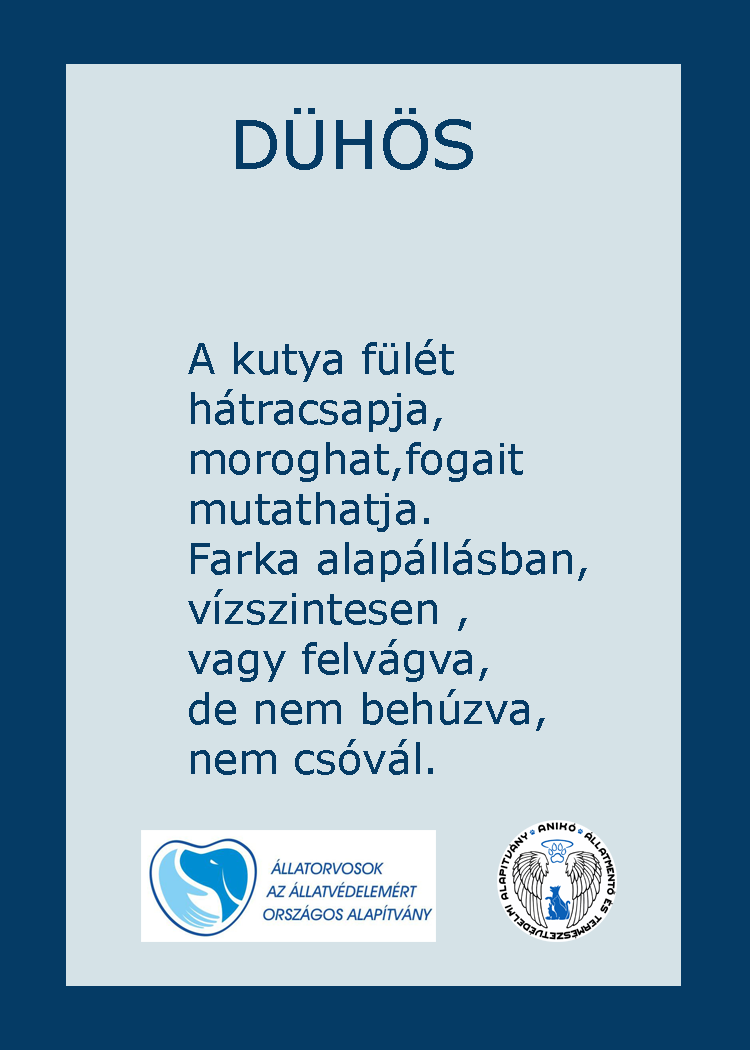
<style>
.page{position:relative;width:750px;height:1050px;background:#d5e2e7}
.page>*{position:absolute;margin:0}
.t1{font:66.7px "Verdana";color:#053b65}
.t2{font:66.7px "GravitateBRK";color:#053b65}
.t3{font:41.7px "Verdana";color:#053b65}
</style>
<div class="page">
<p class="t1" style="left:236px;top:108px;width:237px;height:62px"><span class="t2">        </span>DÜHÖS</p>
<p class="t3" style="left:188px;top:339px;width:399px;height:436px">A kutya fülét <br>hátracsapja,<br>moroghat,fogait <br>mutathatja.<br>Farka alapállásban,<br>vízszintesen ,<br>vagy felvágva,<br>de nem behúzva,<br>nem csóvál.</p>
</div>
